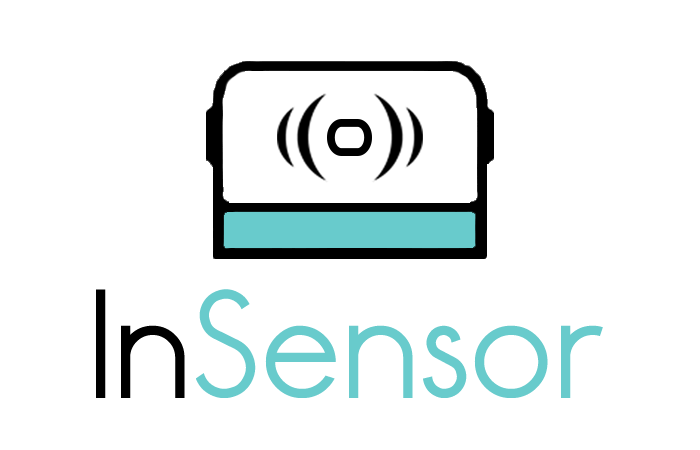
<style>
.page{position:relative;width:700px;height:450px;background:#ffffff}
.page>*{position:absolute;margin:0}
.t1{font:184.7px "MadeleinaSans";letter-spacing:0.01em;color:#68cbcc}
.t2{font:184.7px "MadeleinaSans";letter-spacing:0.01em;color:#000000}
</style>
<div class="page">
<p class="t1" style="left:96px;top:289px;width:507px;height:109px"><span class="t2">In</span>Sensor</p>
</div>
